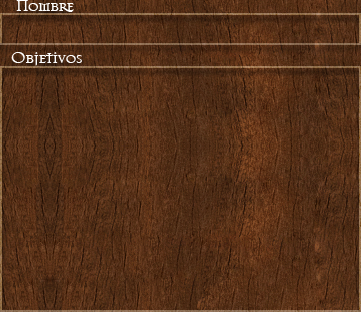
<style>
.page{position:relative;width:361px;height:312px}
.page>*{position:absolute;margin:0}
.t1{font:18px "Mason-Regular";letter-spacing:-0.06em;color:#ffffff}
</style>
<div class="page">
<p class="t1" style="left:16px;top:0px;width:58px;height:12px">Nombre</p>
<p class="t1" style="left:11px;top:52px;width:71px;height:14px">Objetivos</p>
</div>
